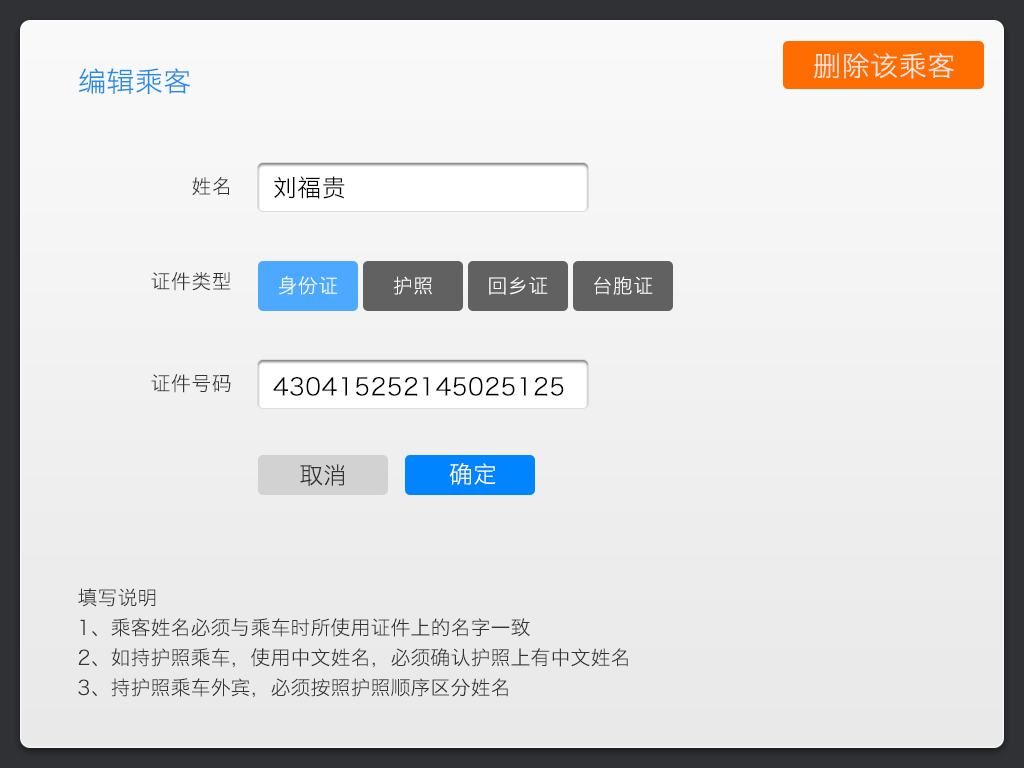
<style>
.page{position:relative;width:1024px;height:768px}
.page>*{position:absolute;margin:0}
.t1{font:28px "HiraginoSansGB-W3";letter-spacing:0.02em;color:#ffe7dd}
.t2{font:28px "HiraginoSansGB-W3";letter-spacing:0.02em;color:#278be8}
.t3{font:20px "HiraginoSansGB-W3";letter-spacing:0.02em;color:#333333}
.t4{font:24px "HiraginoSansGB-W3";letter-spacing:0.02em;color:#000000}
.t5{font:20px "HiraginoSansGB-W3";letter-spacing:0.02em;color:#ffffff}
.t6{font:24px "HiraginoSansGB-W3";color:#333333}
.t7{font:24px "HiraginoSansGB-W3";color:#ffffff}
.t8{font:20px/30px "HiraginoSansGB-W3";color:#333333}
</style>
<div class="page">
<p class="t1" style="left:813px;top:52px;width:141px;height:27px">删除该乘客</p>
<p class="t2" style="left:79px;top:68px;width:111px;height:26px">编辑乘客</p>
<p class="t3" style="left:192px;top:177px;width:37px;height:19px">姓名</p>
<p class="t4" style="left:274px;top:176px;width:71px;height:23px">刘福贵</p>
<p class="t3" style="left:151px;top:272px;width:80px;height:19px">证件类型</p>
<p class="t5" style="left:279px;top:276px;width:59px;height:19px">身份证</p>
<p class="t5" style="left:394px;top:276px;width:38px;height:19px">护照</p>
<p class="t5" style="left:489px;top:276px;width:59px;height:19px">回乡证</p>
<p class="t5" style="left:594px;top:276px;width:59px;height:19px">台胞证</p>
<p class="t3" style="left:151px;top:374px;width:80px;height:19px">证件号码</p>
<p class="t4" style="left:273px;top:377px;width:291px;height:19px">430415252145025125</p>
<p class="t6" style="left:300px;top:464px;width:45px;height:23px">取消</p>
<p class="t7" style="left:449px;top:463px;width:47px;height:22px">确定</p>
<p class="t8" style="left:78px;top:588px;width:550px;height:110px">填写说明<br>1、乘客姓名必须与乘车时所使用证件上的名字一致<br>2、如持护照乘车，使用中文姓名，必须确认护照上有中文姓名<br>3、持护照乘车外宾，必须按照护照顺序区分姓名</p>
</div>
